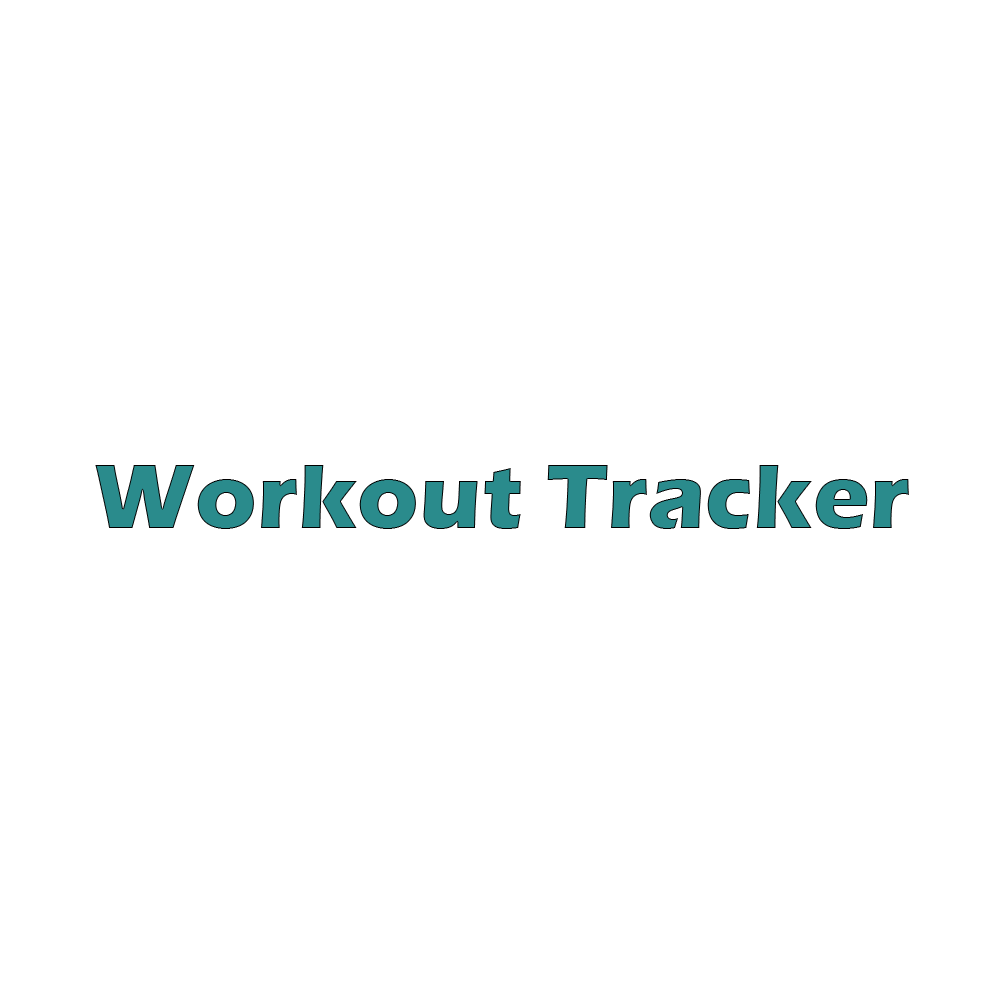
<style>
.page{position:relative;width:1000px;height:1000px;background:#ffffff}
.page>*{position:absolute;margin:0}
.t1{font:95.2px "ErasITC-Bold";color:#2a8b8c}
</style>
<div class="page">
<p class="t1" style="left:95px;top:465px;width:814px;height:64px">Workout Tracker</p>
</div>
